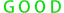
<style>
.page{position:relative;width:64px;height:13px;background:#ffffff}
.page>*{position:absolute;margin:0}
.t1{font:16.7px "AdobeHeitiStd-Regular";color:#0fda0c}
</style>
<div class="page">
<p class="t1" style="left:3px;top:0px;width:58px;height:13px">G O O D</p>
</div>
